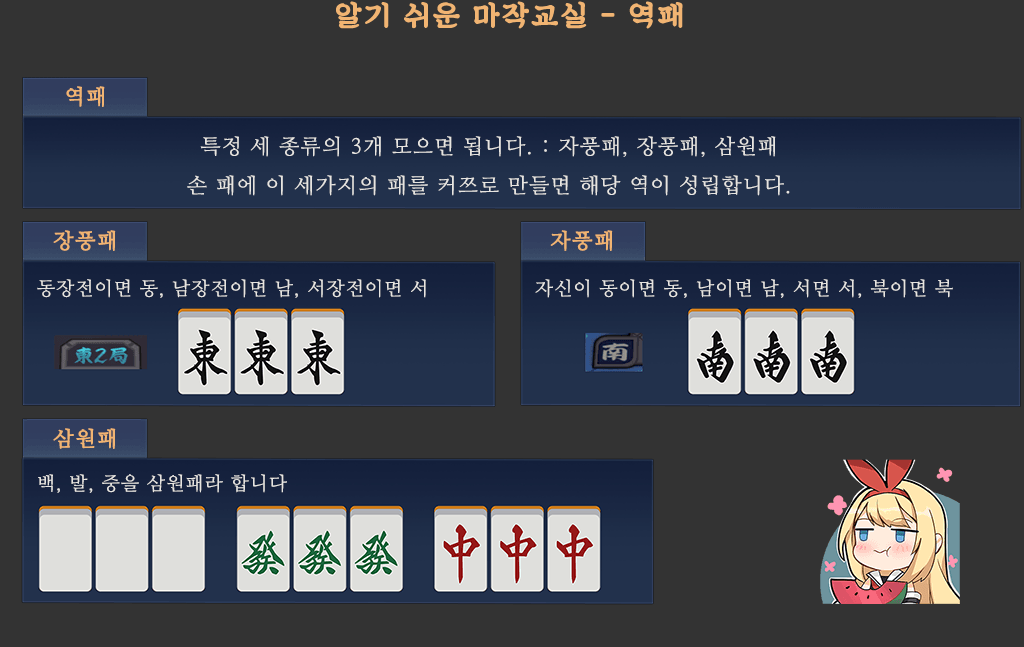
<style>
.page{position:relative;width:1024px;height:647px;background:#333333}
.page>*{position:absolute;margin:0}
.t1{font:29px "SDKukdetopokki-aLt";letter-spacing:0.06em;color:#f1b472;font-weight:bold}
.t2{font:21px "NanumMyeongjo";letter-spacing:0.06em;color:#f1b472;font-weight:bold}
.t3{font:21px/39px "NanumMyeongjo";letter-spacing:0.06em;color:#e7e5e1}
.t4{font:19px "NanumMyeongjo";letter-spacing:0.06em;color:#e7e5e1}
</style>
<div class="page">
<p class="t1" style="left:336px;top:1px;width:347px;height:28px">알기 쉬운 마작교실 - 역패</p>
<p class="t2" style="left:66px;top:86px;width:39px;height:21px">역패</p>
<p class="t3" style="left:187px;top:136px;width:603px;height:60px;text-align:center">특정 세 종류의 3개 모으면 됩니다. : 자풍패, 장풍패, 삼원패<br>손 패에 이 세가지의 패를 커쯔로 만들면 해당 역이 성립합니다.</p>
<p class="t2" style="left:53px;top:230px;width:63px;height:21px">장풍패</p>
<p class="t2" style="left:550px;top:230px;width:63px;height:21px">자풍패</p>
<p class="t4" style="left:37px;top:279px;width:389px;height:19px">동장전이면 동, 남장전이면 남, 서장전이면 서</p>
<p class="t4" style="left:535px;top:279px;width:418px;height:19px">자신이 동이면 동, 남이면 남, 서면 서, 북이면 북</p>
<p class="t2" style="left:53px;top:428px;width:63px;height:21px">삼원패</p>
<p class="t4" style="left:38px;top:474px;width:249px;height:19px">백, 발, 중을 삼원패라 합니다</p>
</div>
